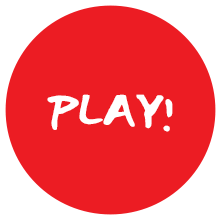
<style>
.page{position:relative;width:221px;height:221px;background:#ec1c23}
.page>*{position:absolute;margin:0}
.t1{font:49.1px "emilyyyyyy";color:#ffffff}
</style>
<div class="page">
<p class="t1" style="left:47px;top:94px;width:126px;height:38px">PLAY!</p>
</div>
